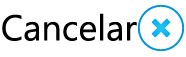
<style>
.page{position:relative;width:186px;height:57px;background:#ffffff}
.page>*{position:absolute;margin:0}
.t1{font:36px "SegoeUI";color:#010000}
</style>
<div class="page">
<p class="t1" style="left:2px;top:13px;width:135px;height:28px">Cancelar</p>
</div>
